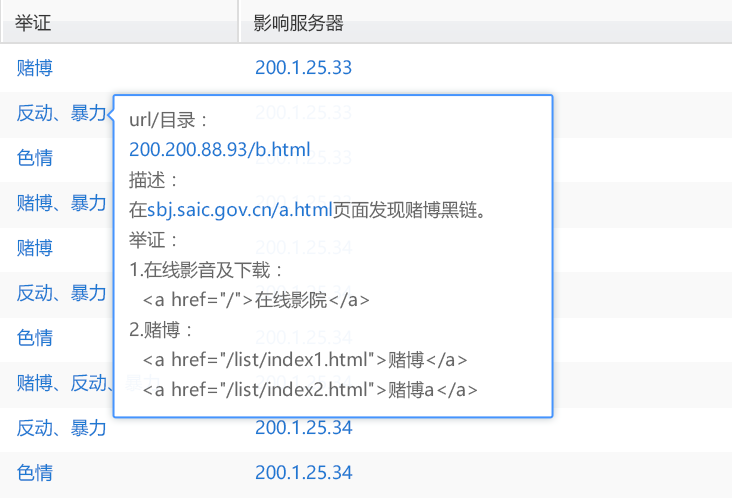
<style>
.page{position:relative;width:732px;height:500px;background:#ffffff}
.page>*{position:absolute;margin:0}
.t1{font:18px "MicrosoftYaHei";color:#333333}
.t2{font:18px/45px "MicrosoftYaHei";color:#1e78d2}
.t3{font:18px/45px "MicrosoftYaHei"}
.t4{font:18px/30px "MicrosoftYaHei";color:#666666}
.t5{font:18px/30px "MicrosoftYaHei";color:#1e78d2}
</style>
<div class="page">
<p class="t1" style="left:15px;top:14px;width:36px;height:18px">举证</p>
<p class="t1" style="left:254px;top:13px;width:90px;height:19px">影响服务器</p>
<p class="t2" style="left:17px;top:58px;width:143px;height:424px">赌博<br>反动、暴力<br>色情<br>赌博、暴力<br>赌博<br>反动、暴力<br>色情<br>赌博、反动、暴力<br>反动、暴力<br>色情</p>
<p class="t3" style="left:255px;top:60px;width:98px;height:420px">200.1.25.33<br>200.1.25.33<br>200.1.25.33<br>200.1.25.33<br>200.1.25.34<br>200.1.25.34<br>200.1.25.34<br>200.1.25.34<br>200.1.25.34<br>200.1.25.34</p>
<p class="t4" style="left:129px;top:111px;width:354px;height:288px">url/目录：<br><span class="t5">200.200.88.93/b.html<br></span>描述：<br>在<span class="t5">sbj.saic.gov.cn/a.html</span>页面发现赌博黑链。<br>举证：<br>1.在线影音及下载：<br>  &lt;a href="/"&gt;在线影院&lt;/a&gt;<br>2.赌博：<br>  &lt;a href="/list/index1.html"&gt;赌博&lt;/a&gt;<br>  &lt;a href="/list/index2.html"&gt;赌博a&lt;/a&gt;</p>
</div>
